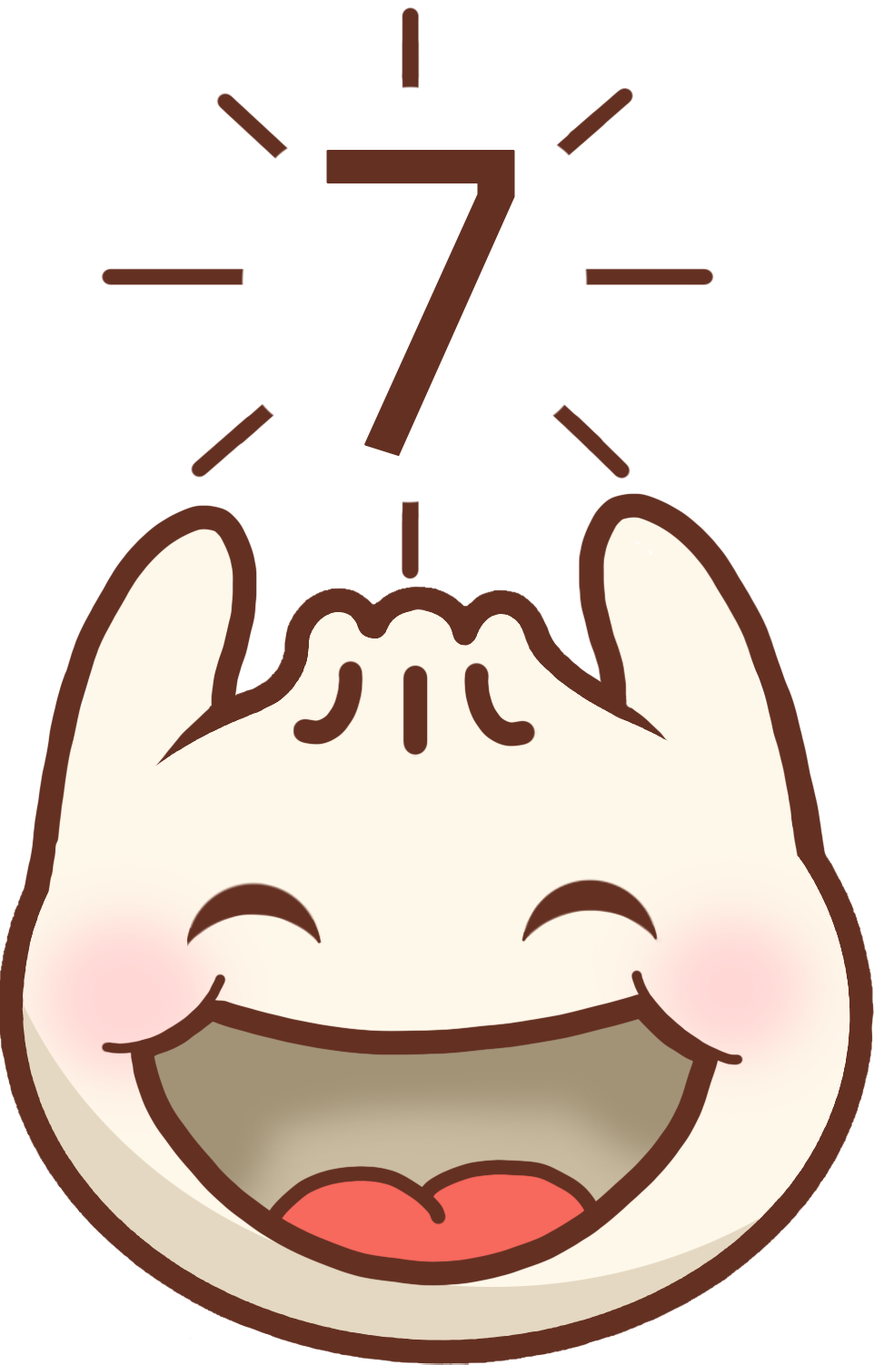
<style>
.page{position:relative;width:874px;height:1365px;background:#ffffff}
.page>*{position:absolute;margin:0}
.t1{font:454.1px "TitilliumWeb-Regular";letter-spacing:0.01em;color:#643022;font-weight:bold}
</style>
<div class="page">
<p class="t1" style="left:326px;top:150px;width:189px;height:307px">7</p>
</div>
